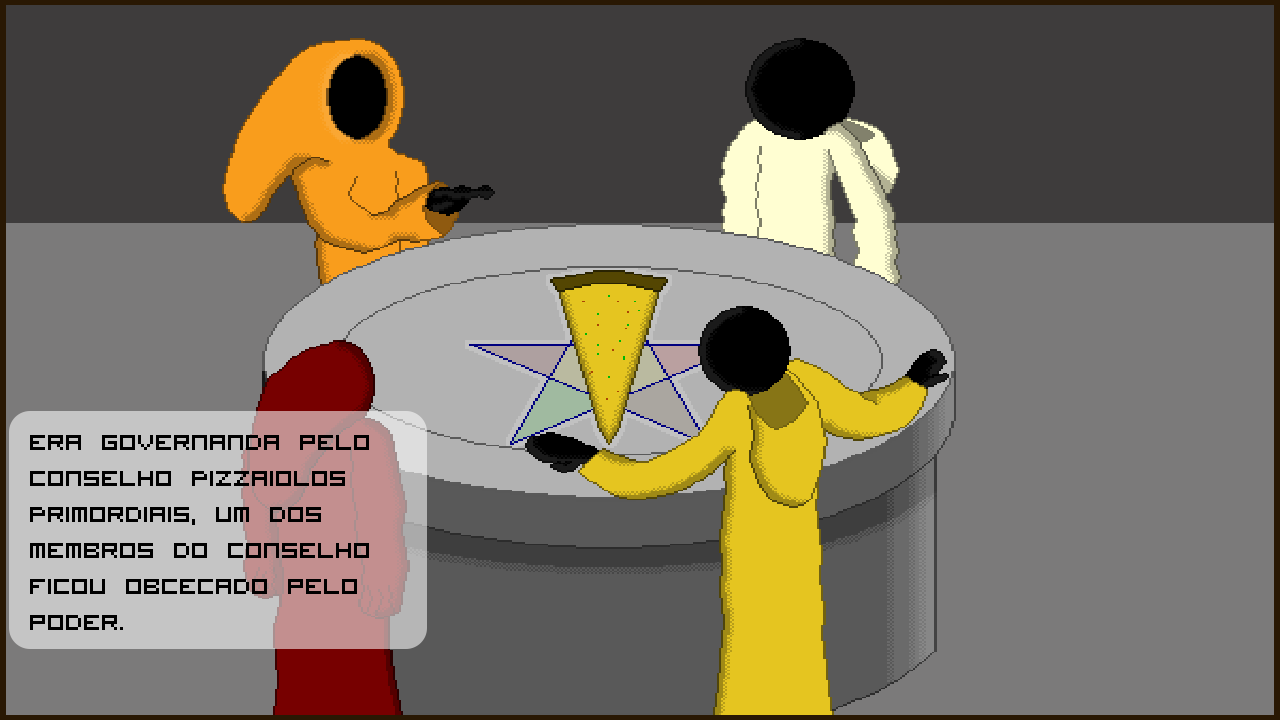
<style>
.page{position:relative;width:1280px;height:720px;background:#7b7a7a}
.page>*{position:absolute;margin:0}
.t1{font:30px "VisitorTT1BRK";color:#000000}
</style>
<div class="page">
<p class="t1" style="left:30px;top:435px;width:339px;height:195px">era governanda pelo conselho Pizzaiolos Primordiais, um dos membros do conselho ficou obcecado pelo poder.</p>
</div>
